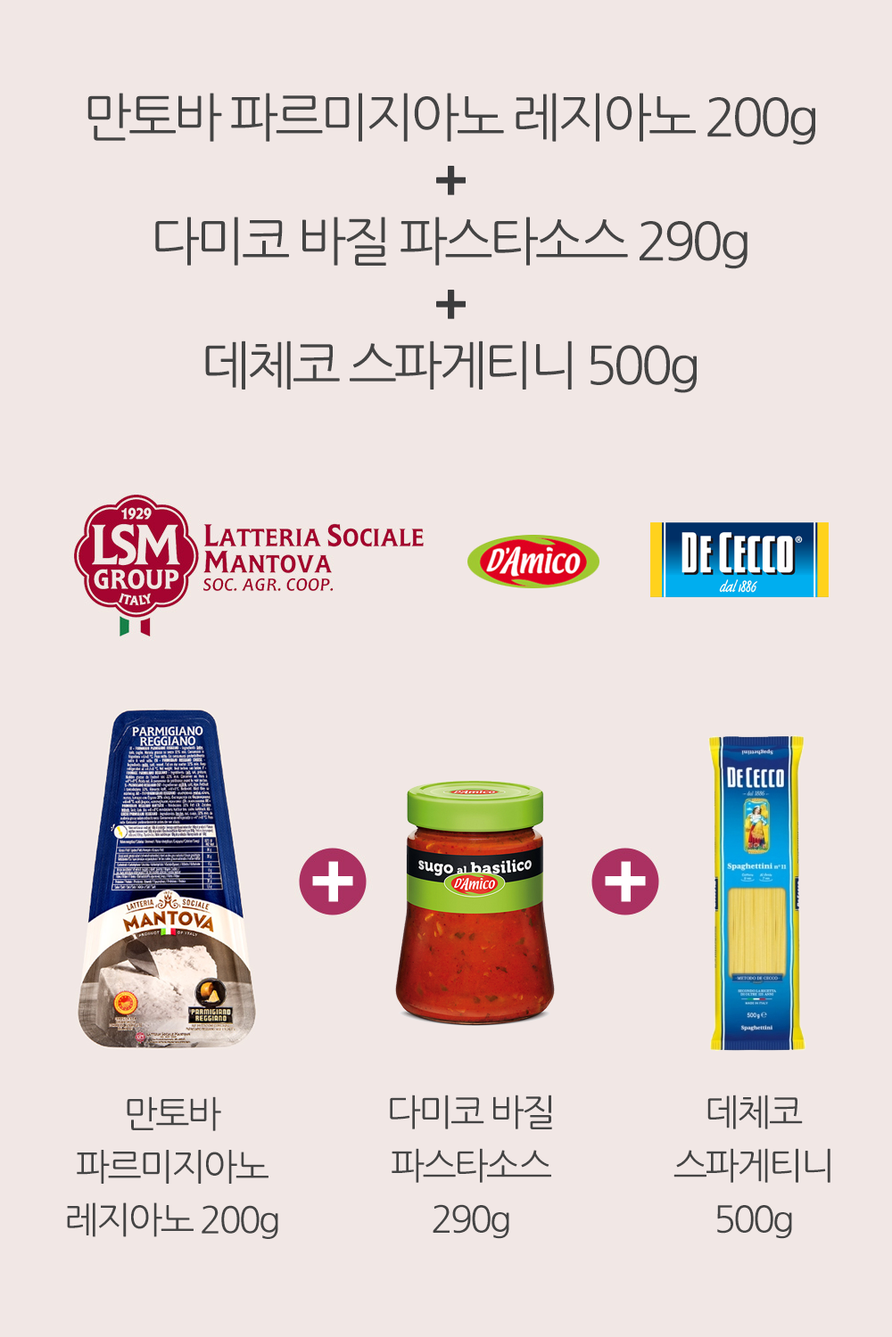
<style>
.page{position:relative;width:892px;height:1337px;background:#f1e7e5}
.page>*{position:absolute;margin:0}
.t1{font:52.4px/124px "NanumGothic";letter-spacing:-0.075em;color:#444444}
.t2{font:52.4px/124px "NanumGothicExtraBold";letter-spacing:-0.075em;color:#3c3c3d}
.t3{font:36.9px/53px "NanumGothic";letter-spacing:-0.075em;color:#444444}
.t4{font:36.9px/53.5px "NanumGothic";letter-spacing:-0.075em;color:#444444}
</style>
<div class="page">
<p class="t1" style="left:87px;top:93px;width:728px;height:300px;text-align:center">만토바 파르미지아노 레지아노 200g<br>다미코 바질 파스타소스 290g<br>데체코 스파게티니 500g</p>
<p class="t2" style="left:436px;top:166px;width:29px;height:153px;text-align:center">+<br>+</p>
<p class="t3" style="left:67px;top:1097px;width:211px;height:142px;text-align:center">만토바<br>파르미지아노<br>레지아노 200g</p>
<p class="t4" style="left:390px;top:1095px;width:162px;height:144px;text-align:center">다미코 바질<br>파스타소스<br>290g</p>
<p class="t4" style="left:673px;top:1095px;width:157px;height:144px;text-align:center">데체코<br>스파게티니<br>500g</p>
</div>
